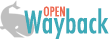
<style>
.page{position:relative;width:110px;height:39px;background:#ffffff}
.page>*{position:absolute;margin:0}
.t1{font:13px "Futura-CondensedMedium";color:#ee6a50}
.t2{font:30px "Futura-CondensedMedium";color:#3daab8}
</style>
<div class="page">
<p class="t1" style="left:43px;top:6px;width:22px;height:11px">OPEN</p>
<p class="t2" style="left:24px;top:8px;width:85px;height:32px">Wayback</p>
</div>
